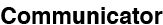
<style>
.page{position:relative;width:163px;height:25px;background:#ffffff}
.page>*{position:absolute;margin:0}
.t1{font:23px "Helvetica-Bold";color:#000000}
</style>
<div class="page">
<p class="t1" style="left:1px;top:7px;width:162px;height:17px">Communicator</p>
</div>
